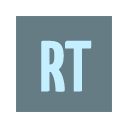
<style>
.page{position:relative;width:128px;height:128px;background:#ffffff}
.page>*{position:absolute;margin:0}
.t1{font:72px "YanoneKaffeesatz-Bold";color:#c3efff}
</style>
<div class="page">
<p class="t1" style="left:41px;top:40px;width:51px;height:52px">RT</p>
</div>
